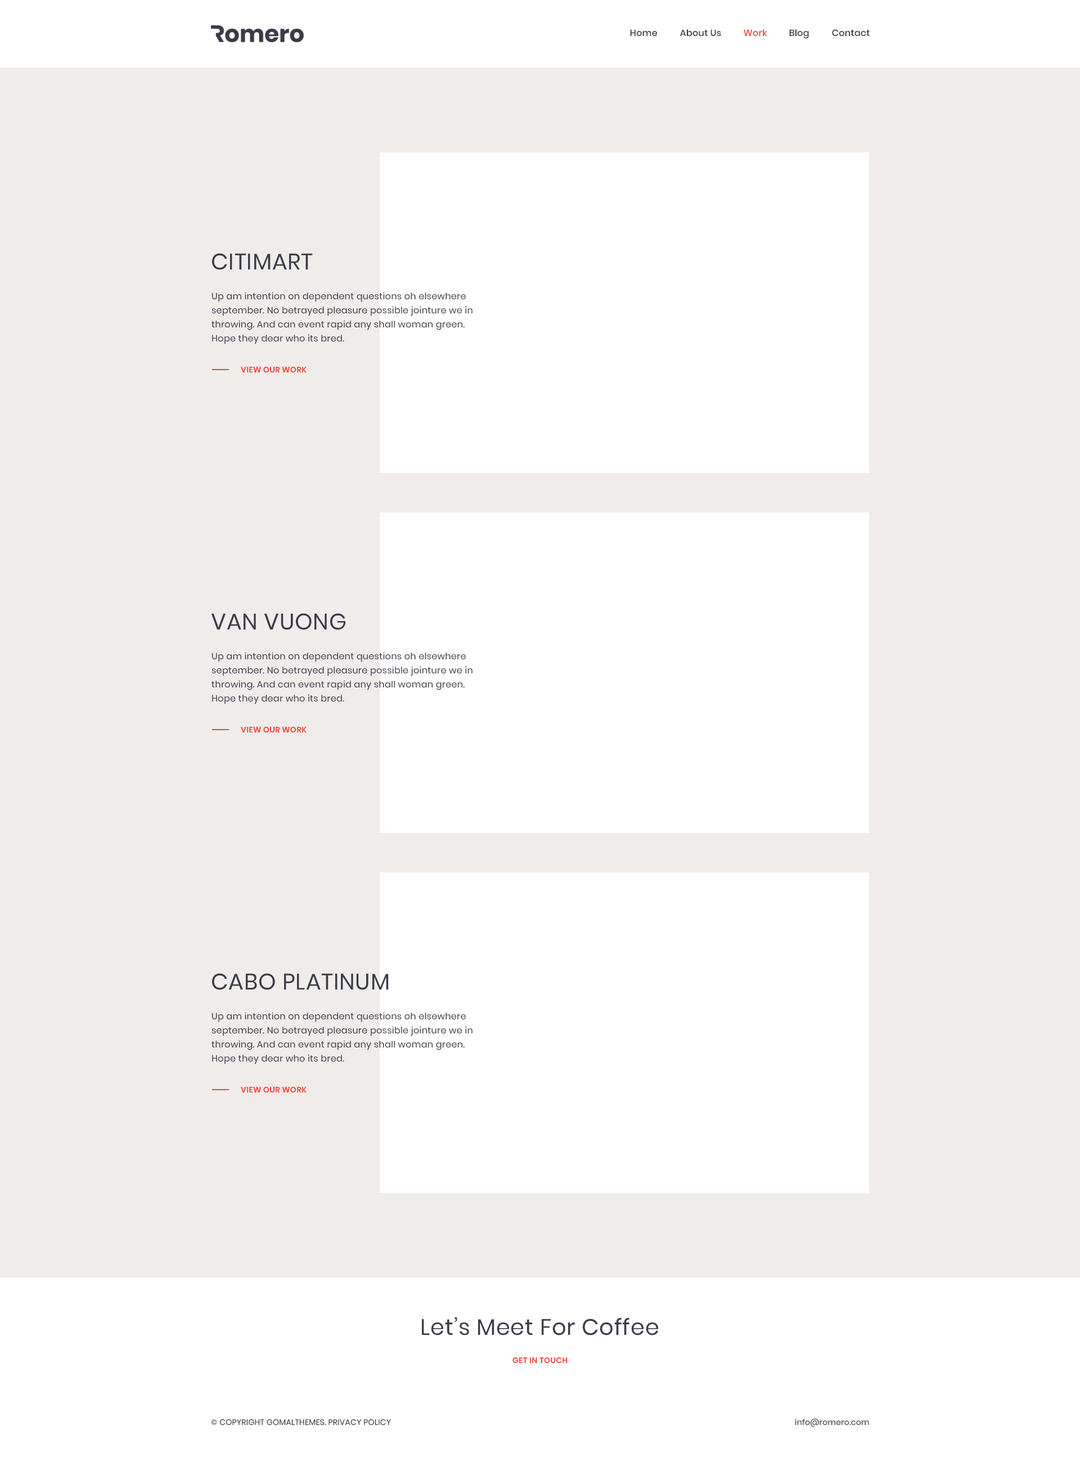
<style>
.page{position:relative;width:1080px;height:1466px;background:#efecea}
.page>*{position:absolute;margin:0}
.t1{font:9px "Poppins-Medium";letter-spacing:0.02em;color:#3a3c49}
.t2{font:9px "Poppins-Medium";letter-spacing:0.02em;color:#f44336}
.t3{font:22.5px "Poppins-Regular";letter-spacing:0.02em;color:#3a3c49}
.t4{font:9px/14.1px "Poppins-Regular";letter-spacing:0.02em;color:#3a3c49}
.t5{font:7.9px "Poppins-SemiBold";letter-spacing:0.02em;color:#f44336}
.t6{font:7.9px "Poppins-Regular";letter-spacing:0.02em;color:#3a3c49}
</style>
<div class="page">
<p class="t1" style="left:630px;top:29px;width:28px;height:8px">Home</p>
<p class="t1" style="left:680px;top:29px;width:41px;height:8px">About Us</p>
<p class="t2" style="left:744px;top:29px;width:23px;height:8px">Work</p>
<p class="t1" style="left:789px;top:29px;width:20px;height:10px">Blog</p>
<p class="t1" style="left:832px;top:29px;width:38px;height:8px">Contact</p>
<p class="t3" style="left:212px;top:253px;width:101px;height:17px">CITIMART</p>
<p class="t4" style="left:212px;top:292px;width:260px;height:52px">Up am intention on dependent questions oh elsewhere september. No betrayed pleasure possible jointure we in throwing. And can event rapid any shall woman green. Hope they dear who its bred.</p>
<p class="t5" style="left:241px;top:366px;width:66px;height:7px">VIEW OUR WORK</p>
<p class="t3" style="left:211px;top:613px;width:134px;height:17px">VAN VUONG</p>
<p class="t4" style="left:212px;top:652px;width:260px;height:52px">Up am intention on dependent questions oh elsewhere september. No betrayed pleasure possible jointure we in throwing. And can event rapid any shall woman green. Hope they dear who its bred.</p>
<p class="t5" style="left:241px;top:726px;width:66px;height:7px">VIEW OUR WORK</p>
<p class="t3" style="left:212px;top:973px;width:177px;height:17px">CABO PLATINUM</p>
<p class="t4" style="left:212px;top:1012px;width:260px;height:52px">Up am intention on dependent questions oh elsewhere september. No betrayed pleasure possible jointure we in throwing. And can event rapid any shall woman green. Hope they dear who its bred.</p>
<p class="t5" style="left:241px;top:1086px;width:66px;height:7px">VIEW OUR WORK</p>
<p class="t3" style="left:422px;top:1317px;width:236px;height:18px">Let’s Meet For Coffee</p>
<p class="t5" style="left:512px;top:1357px;width:56px;height:7px">GET IN TOUCH</p>
<p class="t6" style="left:211px;top:1419px;width:180px;height:6px">© COPYRIGHT GOMALTHEMES. PRIVACY POLICY</p>
<p class="t6" style="left:795px;top:1418px;width:74px;height:9px">info@romero.com</p>
</div>
